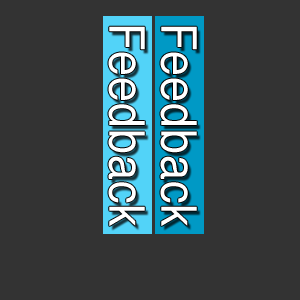
<style>
.page{position:relative;width:300px;height:300px;background:#333333}
.page>*{position:absolute;margin:0}
.t1{font:49.1px "Helvetica";letter-spacing:0.02em;color:#ffffff;scale:0.92 1}
</style>
<div class="page">
<p class="t1" style="left:108px;top:26px;width:37px;height:200px;rotate:90deg">Feedback</p>
<p class="t1" style="left:160px;top:26px;width:37px;height:200px;rotate:90deg">Feedback</p>
</div>
